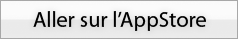
<style>
.page{position:relative;width:238px;height:39px}
.page>*{position:absolute;margin:0}
.t1{font:22px "MyriadPro-Regular";color:#000000}
</style>
<div class="page">
<p class="t1" style="left:33px;top:11px;width:173px;height:20px">Aller sur l’AppStore</p>
</div>
